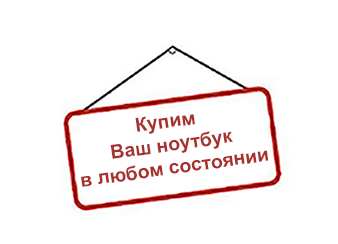
<style>
.page{position:relative;width:338px;height:244px;background:#ffffff}
.page>*{position:absolute;margin:0}
.t1{font:19.4px "Arial-BoldMT";color:#a8312d}
</style>
<div class="page">
<p class="t1" style="left:81px;top:114px;width:188px;height:73px;text-align:center;rotate:-8deg">Купим <br>Ваш ноутбук<br>в любом состоянии</p>
</div>
